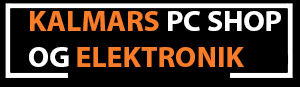
<style>
.page{position:relative;width:300px;height:87px;background:#000000}
.page>*{position:absolute;margin:0}
.t1{font:29.8px "MyriadPro-Bold";color:#ffffff}
.t2{font:29.8px "MyriadPro-Bold";color:#fa7d2a}
.t3{font:29.8px "MyriadPro-Bold";color:#f97c29}
</style>
<div class="page">
<p class="t1" style="left:29px;top:11px;width:252px;height:56px"><span class="t2">KALMARS</span> PC SHOP<br>OG <span class="t3">ELEKTRONIK</span></p>
</div>
